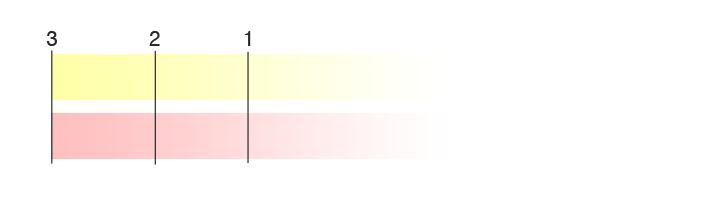
<style>
.page{position:relative;width:712px;height:224px;background:#ffffff}
.page>*{position:absolute;margin:0}
.t1{font:20px "Helvetica";letter-spacing:-0.025em;color:#2a2a2a}
</style>
<div class="page">
<p class="t1" style="left:46px;top:31px;width:11px;height:15px">3</p>
<p class="t1" style="left:149px;top:31px;width:11px;height:15px">2</p>
<p class="t1" style="left:244px;top:31px;width:7px;height:15px">1</p>
</div>
